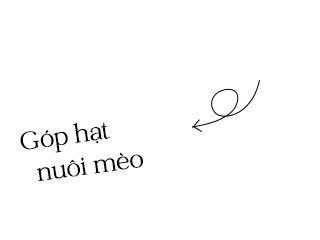
<style>
.page{position:relative;width:320px;height:240px;background:#ffffff}
.page>*{position:absolute;margin:0}
.t1{font:27.3px "DFVN-CatchyMager-Regular";color:#000000}
</style>
<div class="page">
<p class="t1" style="left:20px;top:122px;width:123px;height:60px;rotate:-8deg">Góp hạt<br>  nuôi mèo</p>
</div>
